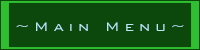
<style>
.page{position:relative;width:200px;height:50px;background:#0c470c}
.page>*{position:absolute;margin:0}
.t1{font:16.7px "BankGothicBT-Light";letter-spacing:0.28em;color:#b8e7f8}
</style>
<div class="page">
<p class="t1" style="left:16px;top:22px;width:168px;height:9px">~Main Menu~</p>
</div>
